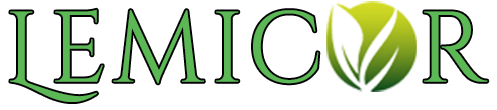
<style>
.page{position:relative;width:497px;height:110px;background:#ffffff}
.page>*{position:absolute;margin:0}
.t1{font:100px "CinzelDecorative-Regular";letter-spacing:0.05em;color:#5cb755}
</style>
<div class="page">
<p class="t1" style="left:10px;top:9px;width:478px;height:93px">Lemic   r</p>
</div>
